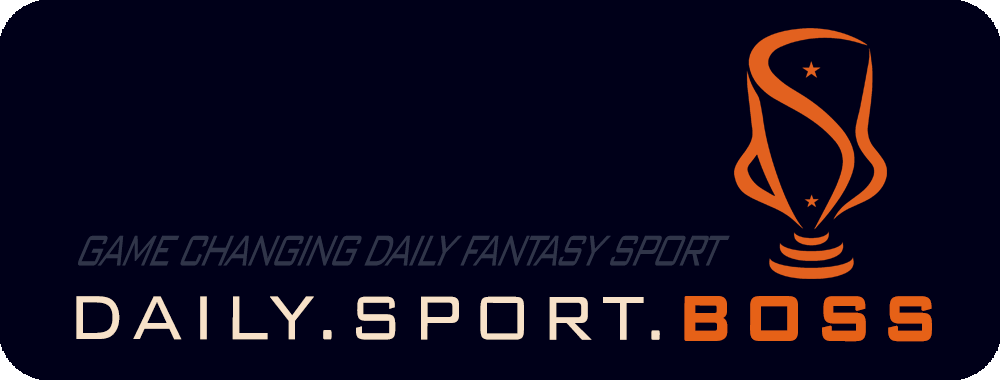
<style>
.page{position:relative;width:1000px;height:380px;background:#000019}
.page>*{position:absolute;margin:0}
.t1{font:60.3px "BankGothicBT-Light";letter-spacing:-0.1em;color:#303549;font-style:italic;scale:0.56 1}
.t2{font:82.3px "BankGothicBT-Light";letter-spacing:0.1em;color:#f7e1c8;scale:0.87 1}
.t3{font:82.3px "BankGothicBT-Medium";letter-spacing:0.1em;color:#e66117;font-weight:bold;scale:0.87 1}
</style>
<div class="page">
<p class="t1" style="left:78px;top:235px;width:652px;height:31px">GAME CHANGING DAILY FANTASY SPORT</p>
<p class="t2" style="left:76px;top:296px;width:856px;height:46px">DAILY.SPORT.<span class="t3">BOSS</span></p>
</div>
